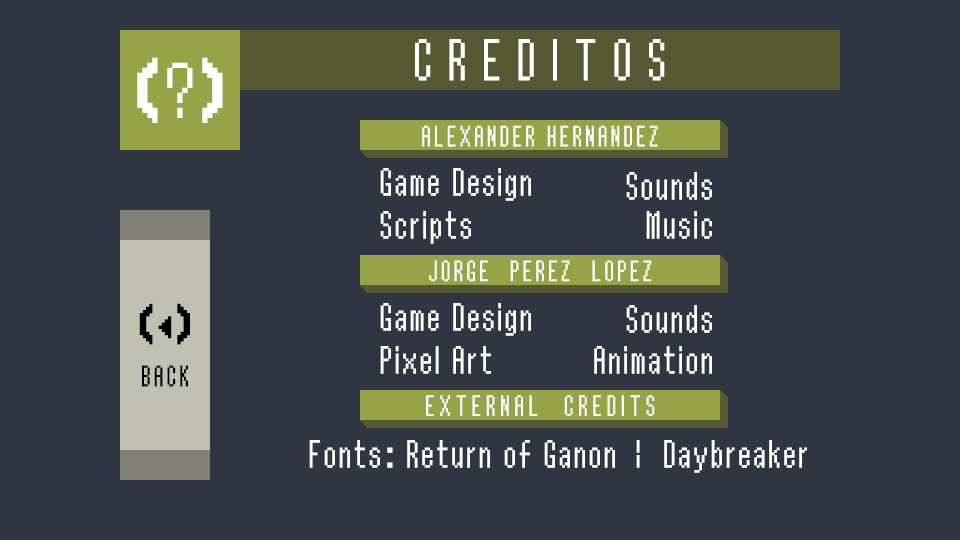
<style>
.page{position:relative;width:960px;height:540px;background:#303641}
.page>*{position:absolute;margin:0}
.t1{font:60px "ReturnOfGanonReg";letter-spacing:0.2em;color:#ffffff}
.t2{font:80px "ReturnOfGanonReg";color:#ffffff}
.t3{font:30px "ReturnOfGanonReg";letter-spacing:0.05em;color:#ffffff}
.t4{font:40px "ReturnOfGanonReg";color:#ffffff}
.t5{font:50px "ReturnOfGanonReg";color:#000000}
.t6{font:30px "ReturnOfGanonReg";letter-spacing:0.05em;color:#000000}
.t7{font:30px "ReturnOfGanonReg";letter-spacing:0.1em;color:#ffffff}
</style>
<div class="page">
<p class="t1" style="left:415px;top:39px;width:250px;height:42px">CREDITOS</p>
<p class="t2" style="left:137px;top:57px;width:86px;height:66px">(?)</p>
<p class="t3" style="left:422px;top:125px;width:236px;height:22px">ALEXANDER HERNANDEZ</p>
<p class="t4" style="left:380px;top:168px;width:151px;height:33px">Game Design</p>
<p class="t4" style="left:626px;top:172px;width:86px;height:28px">Sounds</p>
<p class="t4" style="left:380px;top:211px;width:91px;height:33px">Scripts</p>
<p class="t4" style="left:646px;top:211px;width:66px;height:28px">Music</p>
<p class="t3" style="left:429px;top:260px;width:223px;height:22px">JORGE  PEREZ  LOPEZ</p>
<p class="t5" style="left:139px;top:303px;width:51px;height:42px">(&lt;)</p>
<p class="t4" style="left:380px;top:303px;width:151px;height:33px">Game Design</p>
<p class="t4" style="left:626px;top:305px;width:86px;height:28px">Sounds</p>
<p class="t4" style="left:380px;top:346px;width:111px;height:28px">Pixel Art</p>
<p class="t4" style="left:594px;top:346px;width:118px;height:28px">Animation</p>
<p class="t6" style="left:142px;top:365px;width:46px;height:22px">BACK</p>
<p class="t7" style="left:426px;top:395px;width:229px;height:21px">EXTERNAL  CREDITS</p>
<p class="t4" style="left:309px;top:440px;width:498px;height:33px">Fonts: Return of Ganon /|  Daybreaker</p>
</div>
